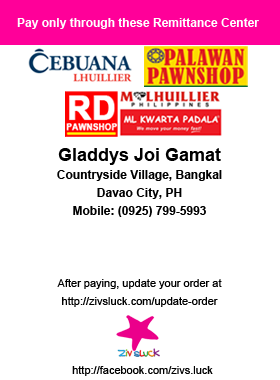
<style>
.page{position:relative;width:280px;height:380px;background:#ffffff}
.page>*{position:absolute;margin:0}
.t1{font:12px "Arial-BoldMT";color:#ffffff}
.t2{font:12px/18px "Arial-BoldMT";color:#000000}
.t3{font:18px/18px "Arial-BoldMT";color:#000000}
.t4{font:11px/18px "ArialMT";color:#000000}
.t5{font:11px "ArialMT";color:#000000}
</style>
<div class="page">
<p class="t1" style="left:17px;top:18px;width:242px;height:11px">Pay only through these Remittance Center</p>
<p class="t2" style="left:57px;top:148px;width:165px;height:159px;text-align:center"><span class="t3">Gladdys Joi Gamat<br></span>Countryside Village, Bangkal<br>Davao City, PH<br>Mobile: (0925) 799-5993<br><br><span class="t4"><br><br>After paying, update your order at<br>http://zivsluck.com/update-order</span></p>
<p class="t5" style="left:72px;top:366px;width:141px;height:10px">http://facebook.com/zivs.luck</p>
</div>
